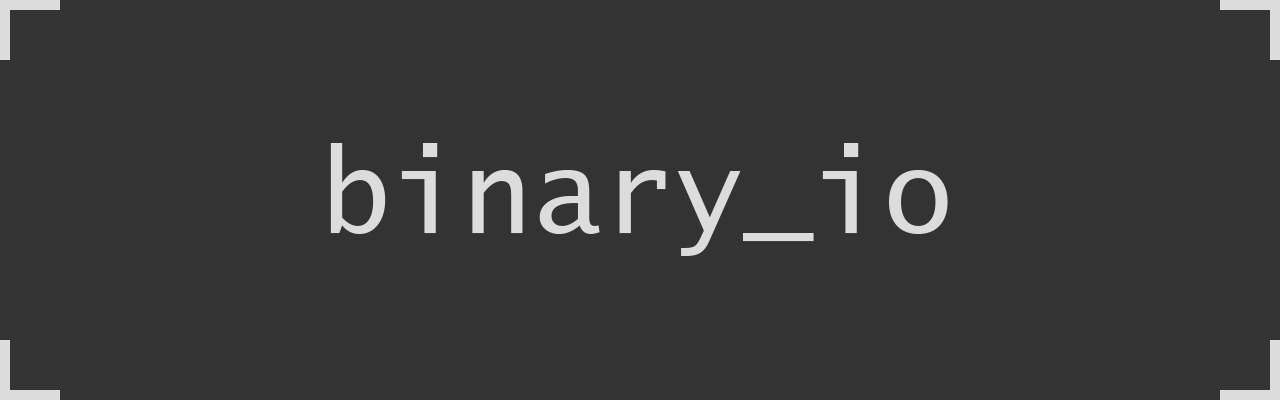
<style>
.page{position:relative;width:1280px;height:400px;background:#333333}
.page>*{position:absolute;margin:0}
.t1{font:200px "LucidaConsole";color:#dcdcdc}
</style>
<div class="page">
<p class="t1" style="left:330px;top:143px;width:618px;height:113px">binary_io</p>
</div>
